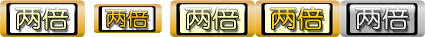
<style>
.page{position:relative;width:425px;height:37px}
.page>*{position:absolute;margin:0}
.t1{font:23.3px "YouYuan";color:#fffeb0;font-weight:bold;scale:1.14 1}
.t2{font:18.6px "YouYuan";color:#ffc600;font-weight:bold;scale:1.14 1}
.t3{font:23.3px "YouYuan";color:#ffd100;font-weight:bold;scale:1.14 1}
.t4{font:23.3px "YouYuan";color:#eaeaea;font-weight:bold;scale:1.14 1}
</style>
<div class="page">
<p class="t1" style="left:15px;top:7px;width:54px;height:23px">两倍</p>
<p class="t2" style="left:105px;top:9px;width:43px;height:19px">两倍</p>
<p class="t1" style="left:185px;top:7px;width:54px;height:23px">两倍</p>
<p class="t3" style="left:270px;top:7px;width:54px;height:23px">两倍</p>
<p class="t4" style="left:355px;top:7px;width:54px;height:23px">两倍</p>
</div>
